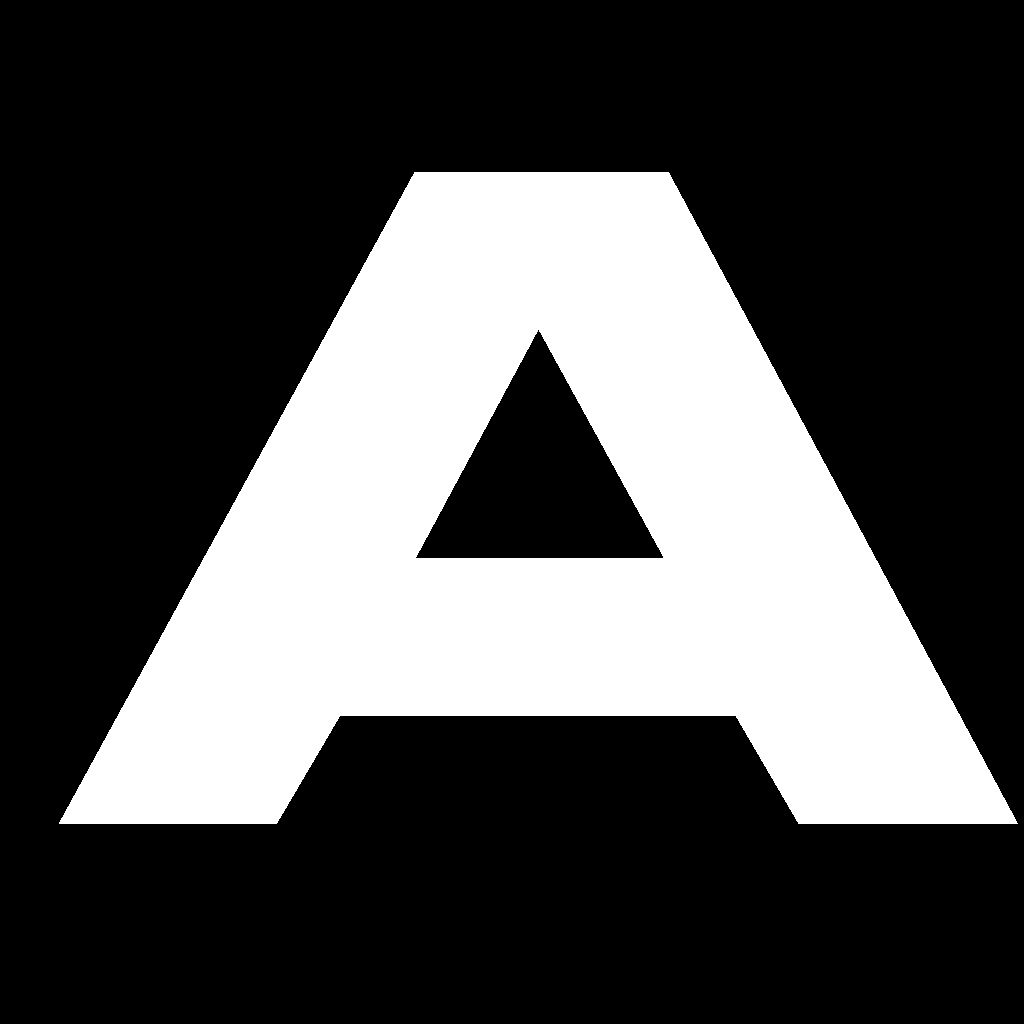
<style>
.page{position:relative;width:1024px;height:1024px;background:#000000}
.page>*{position:absolute;margin:0}
.t1{font:895.8px "Square721BT-BoldExtended";color:#ffffff}
</style>
<div class="page">
<p class="t1" style="left:59px;top:172px;width:959px;height:652px">A</p>
</div>
